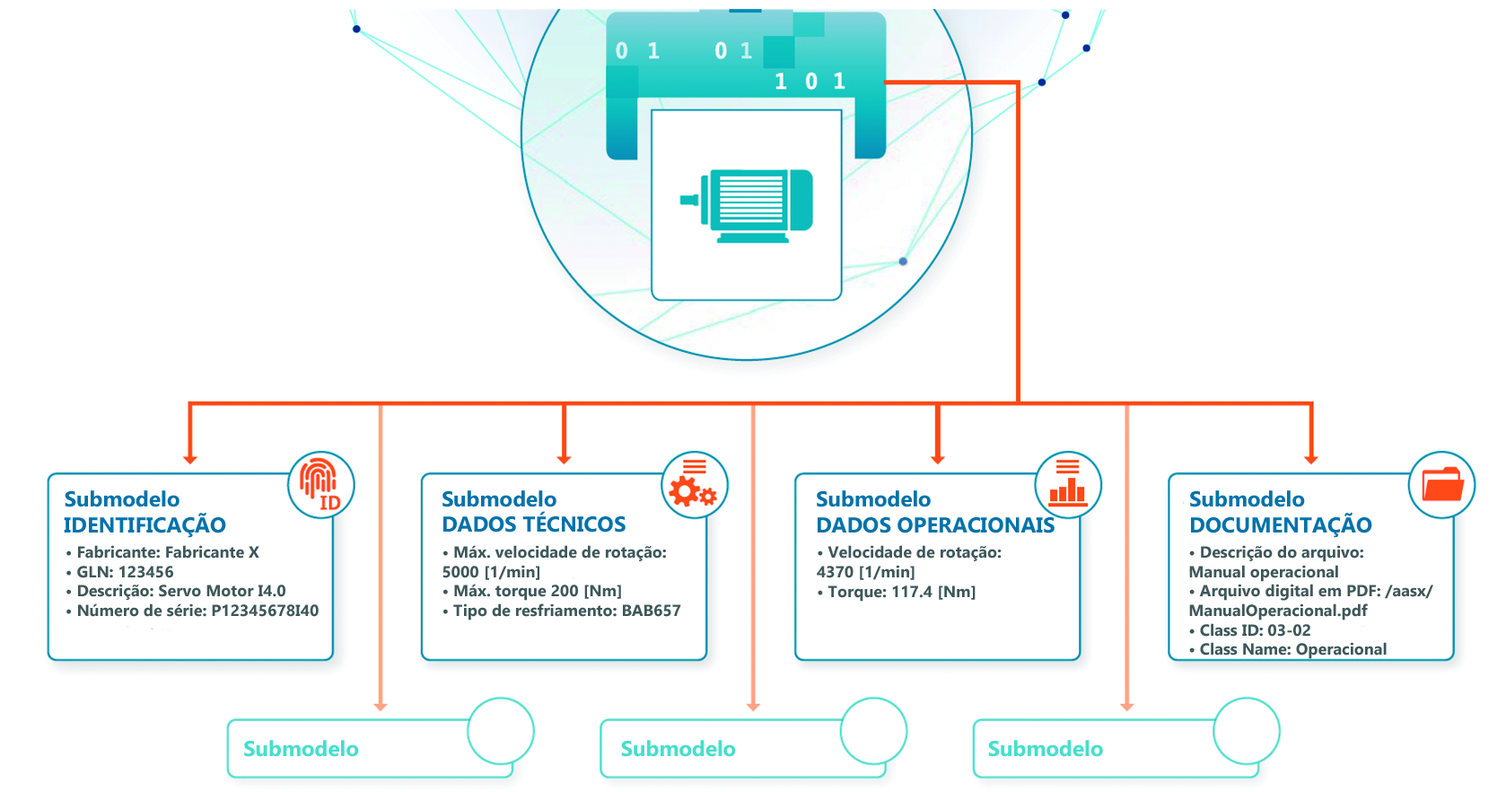
<style>
.page{position:relative;width:1506px;height:792px;background:#ffffff}
.page>*{position:absolute;margin:0}
.t1{font:21.5px "Gadugi-Bold";color:#0072aa}
.t2{font:16.2px "Gadugi-Bold";color:#3d5759}
.t3{font:21.5px "Gadugi-Bold";color:#45dfcc}
</style>
<div class="page">
<p class="t1" style="left:64px;top:490px;width:162px;height:48px">Submodelo<br>IDENTIFICAÇÃO</p>
<p class="t1" style="left:443px;top:490px;width:183px;height:42px">Submodelo<br>DADOS TÉCNICOS</p>
<p class="t1" style="left:817px;top:490px;width:238px;height:43px">Submodelo <br>DADOS OPERACIONAIS</p>
<p class="t1" style="left:1190px;top:490px;width:182px;height:48px">Submodelo <br>DOCUMENTAÇÃO</p>
<p class="t2" style="left:66px;top:545px;width:253px;height:72px">• Fabricante: Fabricante X<br>• GLN: 123456<br>• Descrição: Servo Motor I4.0<br>• Número de série: P12345678I40</p>
<p class="t2" style="left:443px;top:545px;width:238px;height:75px">• Máx. velocidade de rotação: <br>5000 [1/min]<br>• Máx. torque 200 [Nm]<br>• Tipo de resfriamento: BAB657</p>
<p class="t2" style="left:817px;top:545px;width:185px;height:56px">• Velocidade de rotação: <br>4370 [1/min]<br>• Torque: 117.4 [Nm]</p>
<p class="t2" style="left:1189px;top:545px;width:244px;height:114px">• Descrição do arquivo: <br>Manual operacional<br>• Arquivo digital em PDF: /aasx/<br>ManualOperacional.pdf<br>• Class ID: 03-02<br>• Class Name: Operacional</p>
<p class="t3" style="left:244px;top:740px;width:115px;height:17px">Submodelo</p>
<p class="t3" style="left:621px;top:740px;width:115px;height:17px">Submodelo</p>
<p class="t3" style="left:988px;top:740px;width:115px;height:17px">Submodelo</p>
</div>
